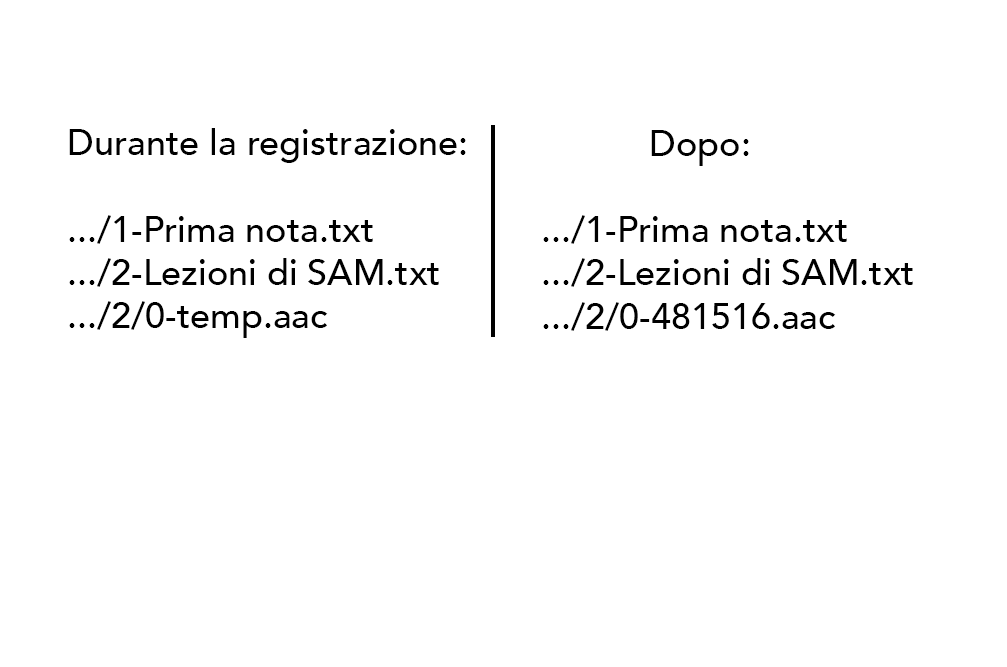
<style>
.page{position:relative;width:1007px;height:667px;background:#ffffff}
.page>*{position:absolute;margin:0}
.t1{font:36px "Avenir-Medium";color:#000000}
</style>
<div class="page">
<p class="t1" style="left:69px;top:128px;width:397px;height:210px">Durante la registrazione:<br><br>.../1-Prima nota.txt                 <br>.../2-Lezioni di SAM.txt<br>.../2/0-temp.aac</p>
<p class="t1" style="left:543px;top:130px;width:370px;height:201px">Dopo:<br><br>.../1-Prima nota.txt<br>.../2-Lezioni di SAM.txt<br>.../2/0-481516.aac</p>
</div>
